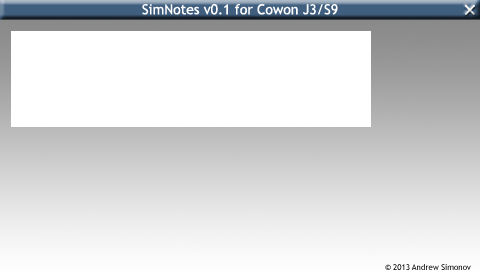
<style>
.page{position:relative;width:480px;height:272px;background:#ffffff}
.page>*{position:absolute;margin:0}
.t1{font:14px "TrebuchetMS";color:#ffffff}
.t2{font:8px "TrebuchetMS";color:#000000}
</style>
<div class="page">
<p class="t1" style="left:142px;top:3px;width:196px;height:12px">SimNotes v0.1 for Cowon J3/S9</p>
<p class="t2" style="left:385px;top:264px;width:86px;height:6px">© 2013 Andrew Simonov</p>
</div>
